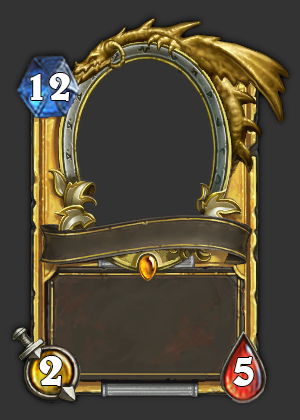
<style>
.page{position:relative;width:300px;height:420px;background:#333333}
.page>*{position:absolute;margin:0}
.t1{font:44px "BelweBT-Bold";color:#ffffff}
.t2{font:48px "BelweBT-Bold";color:#ffffff}
</style>
<div class="page">
<p class="t1" style="left:30px;top:73px;width:40px;height:28px">12</p>
<p class="t2" style="left:39px;top:356px;width:23px;height:30px">2</p>
<p class="t2" style="left:233px;top:357px;width:21px;height:29px">5</p>
</div>
